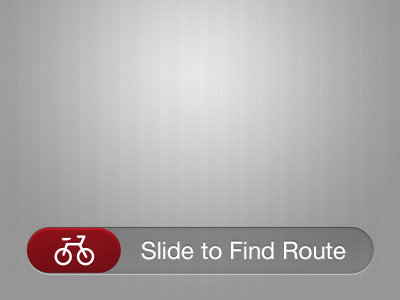
<style>
.page{position:relative;width:400px;height:300px}
.page>*{position:absolute;margin:0}
.t1{font:24px "HelveticaNeue";color:#ffffff}
</style>
<div class="page">
<p class="t1" style="left:141px;top:241px;width:205px;height:19px">Slide to Find Route</p>
</div>
